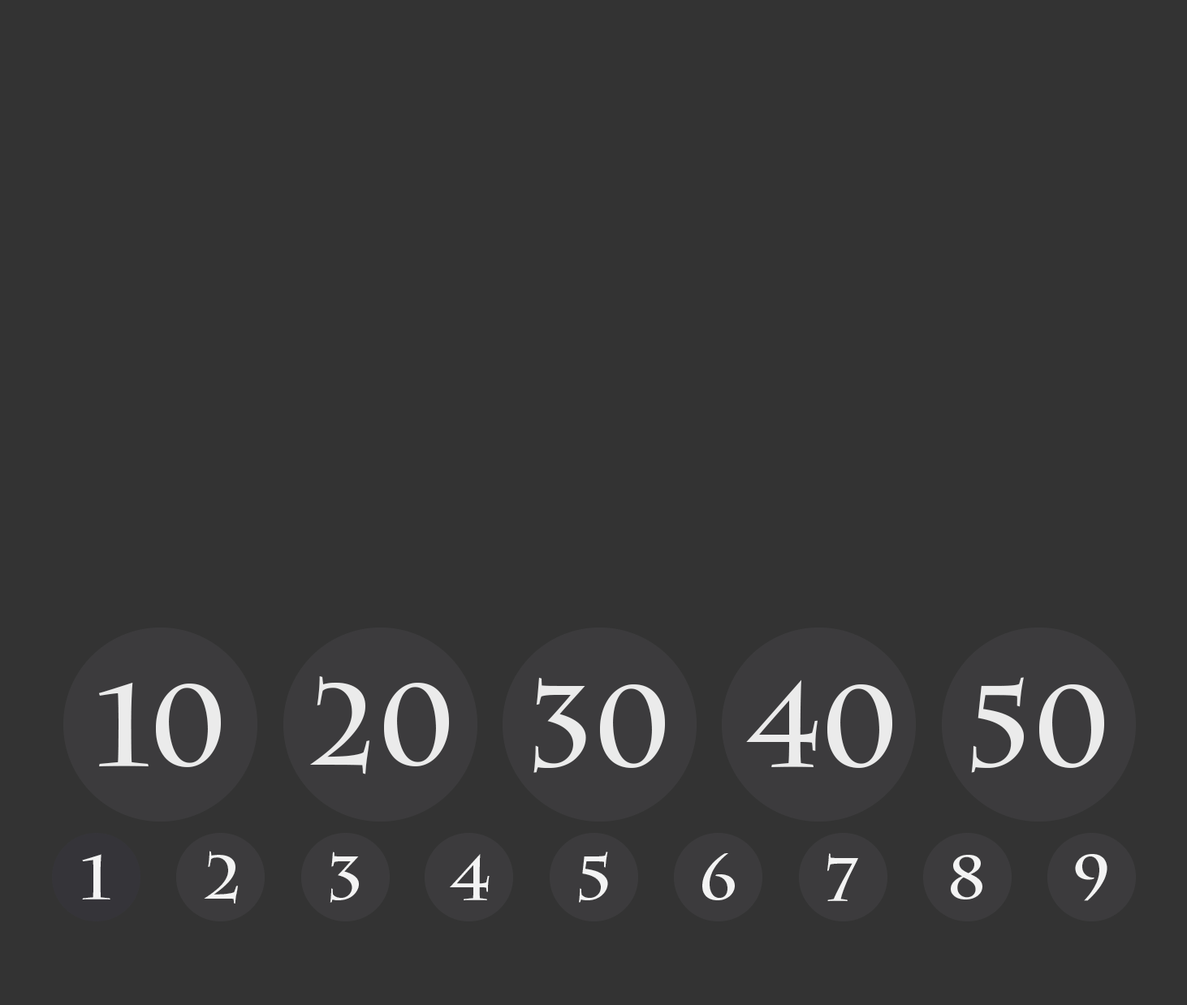
<style>
.page{position:relative;width:1187px;height:1005px;background:#333333}
.page>*{position:absolute;margin:0}
.t1{font:114.5px "CharlemagneStd-Bold";color:#f3f3f3}
.t2{font:61.7px "CharlemagneStd-Bold";color:#f3f3f3;scale:1.04 1}
.t3{font:61.7px "CharlemagneStd-Bold";color:#f3f3f3;scale:1.05 1}
.t4{font:61.7px "CharlemagneStd-Bold";color:#f3f3f3;scale:1.03 1}
.t5{font:61.7px "CharlemagneStd-Bold";color:#f3f3f3}
</style>
<div class="page">
<p class="t1" style="left:310px;top:676px;width:139px;height:98px;opacity:0.95">20</p>
<p class="t1" style="left:533px;top:677px;width:132px;height:96px;opacity:0.95">30</p>
<p class="t1" style="left:971px;top:677px;width:133px;height:96px;opacity:0.95">50</p>
<p class="t1" style="left:98px;top:683px;width:123px;height:84px;opacity:0.95">10</p>
<p class="t1" style="left:746px;top:679px;width:146px;height:89px;opacity:0.95">40</p>
<p class="t2" style="left:82px;top:854px;width:28px;height:45px">1</p>
<p class="t3" style="left:204px;top:851px;width:34px;height:52px">2</p>
<p class="t4" style="left:330px;top:851px;width:29px;height:52px">3</p>
<p class="t5" style="left:450px;top:854px;width:39px;height:46px">4</p>
<p class="t5" style="left:579px;top:851px;width:29px;height:52px">5</p>
<p class="t4" style="left:702px;top:853px;width:33px;height:47px">6</p>
<p class="t5" style="left:827px;top:853px;width:31px;height:48px">7</p>
<p class="t5" style="left:950px;top:855px;width:32px;height:44px">8</p>
<p class="t5" style="left:1075px;top:854px;width:32px;height:47px">9</p>
</div>
